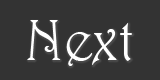
<style>
.page{position:relative;width:160px;height:80px;background:#333333}
.page>*{position:absolute;margin:0}
.t1{font:58.3px "Harrington";color:#ffffff}
</style>
<div class="page">
<p class="t1" style="left:27px;top:20px;width:105px;height:46px">Next</p>
</div>
